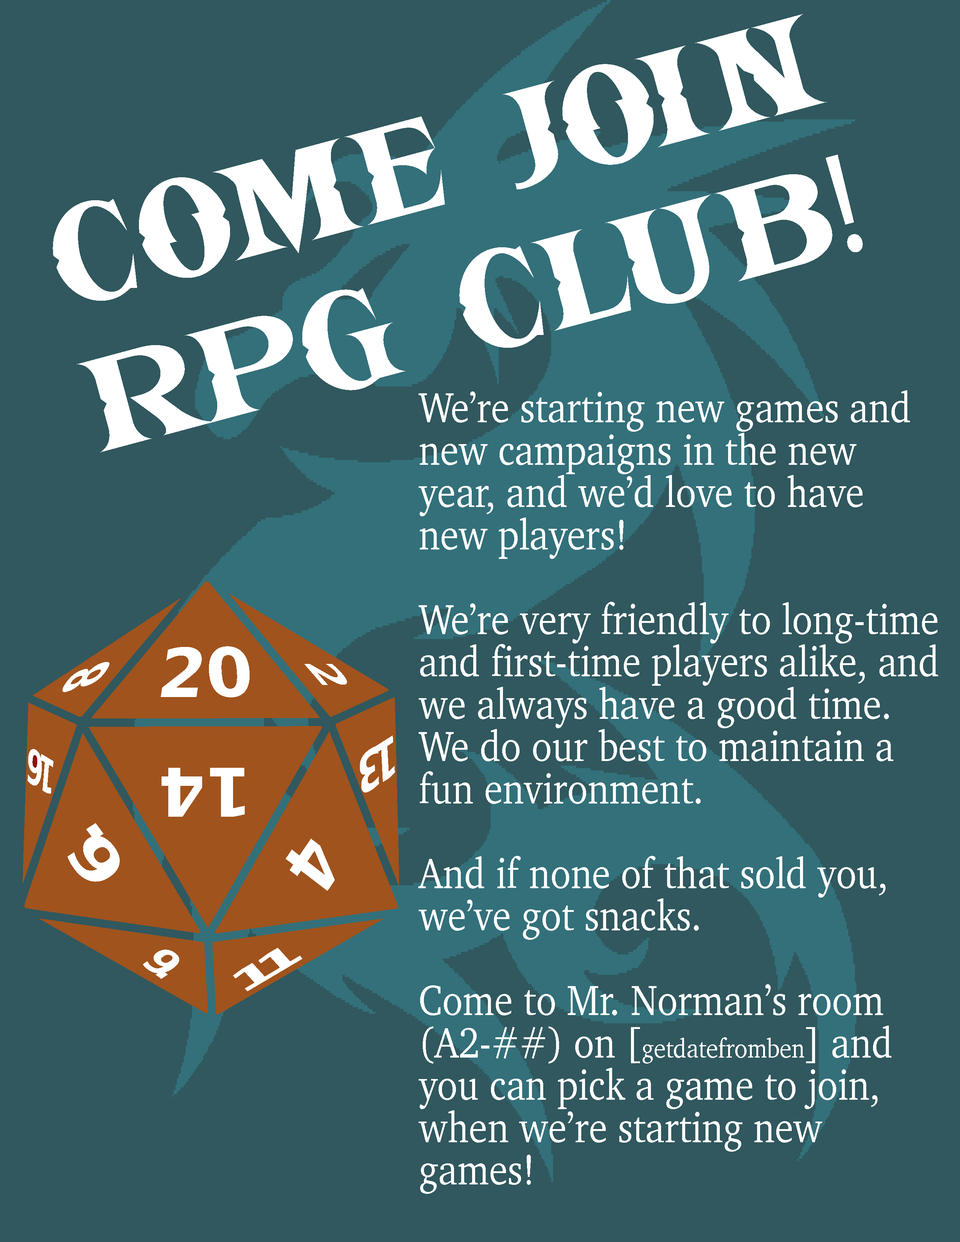
<style>
.page{position:relative;width:960px;height:1242px;background:#30585e}
.page>*{position:absolute;margin:0}
.t1{font:144.3px "KIDCOOLDRAGON";color:#ffffff;scale:0.87 1}
.t2{font:144.3px "MyriadPro-Regular";color:#ffffff;scale:0.87 1}
.t3{font:43.3px/42.3px "Charter-Roman";color:#ffffff;scale:0.87 1}
.t4{font:27.1px/42.3px "Charter-Roman";color:#ffffff;scale:0.87 1}
</style>
<div class="page">
<p class="t1" style="left:53px;top:14px;width:810px;height:438px;rotate:-15deg">Come JOIN RPG CLUB<span class="t2">!</span></p>
<p class="t3" style="left:418px;top:390px;width:520px;height:804px">We’re starting new games and new campaigns in the new year, and we’d love to have new players! <br><br>We’re very friendly to long-time and first-time players alike, and we always have a good time. We do our best to maintain a fun environment.<br><br>And if none of that sold you, we’ve got snacks.<br><br>Come to Mr. Norman’s room (A2-##) on [<span class="t4">getdatefromben</span>] and you can pick a game to join, when we’re starting new games!</p>
</div>
